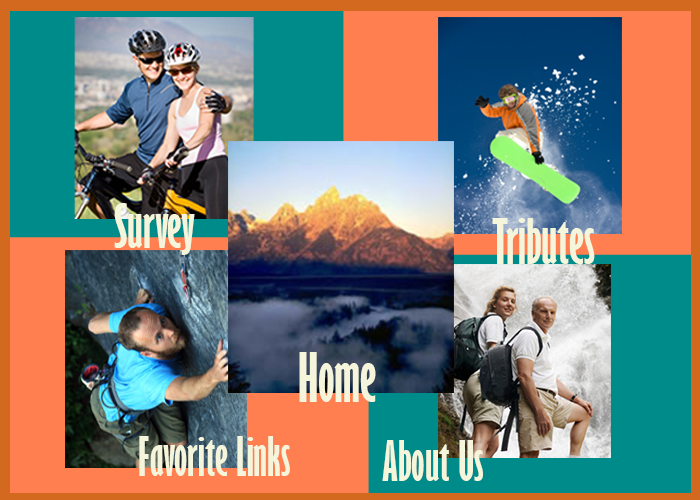
<style>
.page{position:relative;width:700px;height:500px}
.page>*{position:absolute;margin:0}
.t1{font:55.5px "GillSansMT-ExtraCondensedBold";color:#f5f5dc}
.t2{font:57.6px "GillSansMT-ExtraCondensedBold";color:#f5f5dc}
.t3{font:62.6px "GillSansMT-ExtraCondensedBold";color:#f5f5dc}
.t4{font:50px "GillSansMT-ExtraCondensedBold";color:#f5f5dc}
.t5{font:50.8px "GillSansMT-ExtraCondensedBold";color:#f5f5dc}
</style>
<div class="page">
<p class="t1" style="left:114px;top:203px;width:81px;height:52px">Survey</p>
<p class="t2" style="left:492px;top:218px;width:103px;height:46px">Tributes</p>
<p class="t3" style="left:299px;top:352px;width:77px;height:50px">Home</p>
<p class="t4" style="left:139px;top:436px;width:151px;height:40px">Favorite Links</p>
<p class="t5" style="left:382px;top:440px;width:101px;height:41px">About Us</p>
</div>
